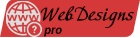
<style>
.page{position:relative;width:140px;height:38px;background:#d53838}
.page>*{position:absolute;margin:0}
.t1{font:18px "Adventure";color:#000000;font-weight:bold}
.t2{font:12px "Roboto-Bold";color:#000000;font-style:italic}
</style>
<div class="page">
<p class="t1" style="left:40px;top:6px;width:94px;height:22px">WebDesigns</p>
<p class="t2" style="left:44px;top:27px;width:18px;height:10px">pro</p>
</div>
